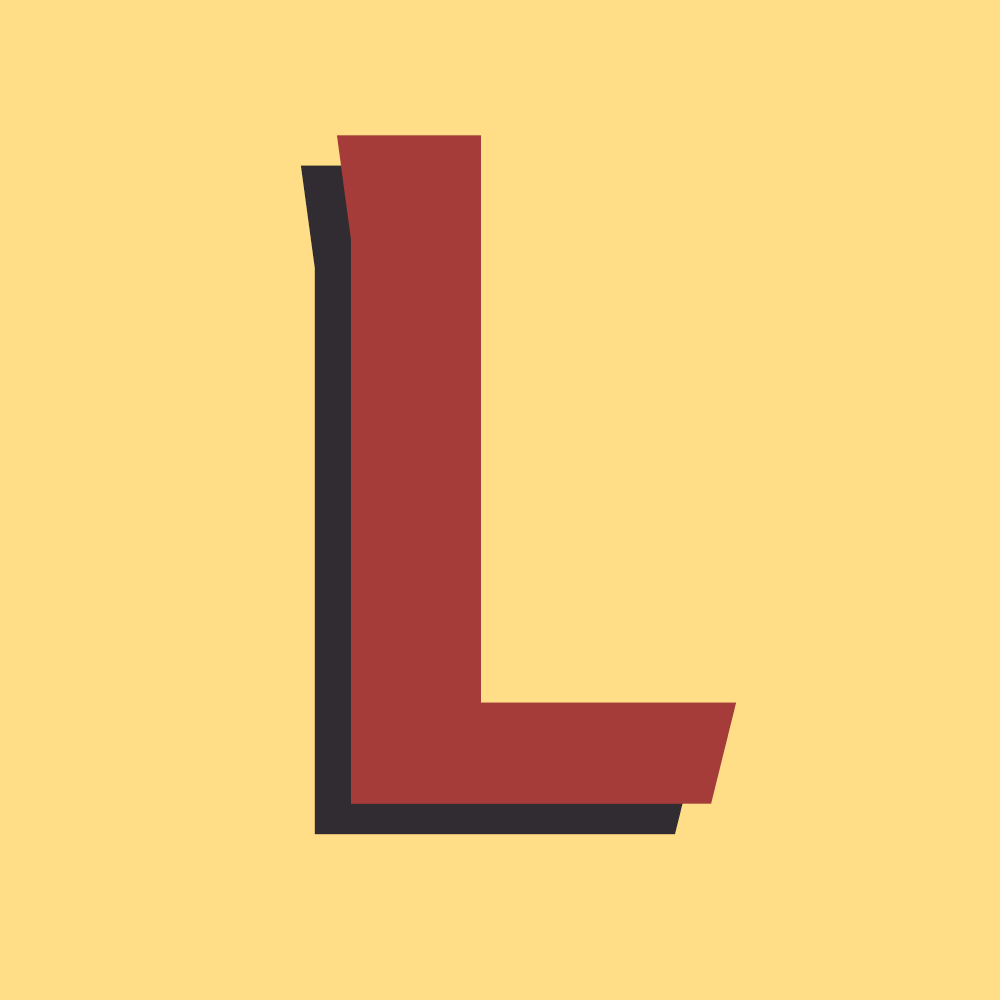
<style>
.page{position:relative;width:1000px;height:1000px;background:#ffde87}
.page>*{position:absolute;margin:0}
.t1{font:1000.9px "FontinSans-Bold";color:#a53c39}
.t2{font:1000.7px "FontinSans-Bold"}
</style>
<div class="page">
<p class="t1" style="left:337px;top:135px;width:399px;height:669px">L</p>
<p class="t2" style="left:300px;top:165px;width:400px;height:670px">L</p>
</div>
